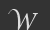
<style>
.page{position:relative;width:50px;height:30px;background:#333333}
.page>*{position:absolute;margin:0}
.t1{font:24px "LucidaCalligraphy-Italic";color:#dddddd}
</style>
<div class="page">
<p class="t1" style="left:8px;top:9px;width:30px;height:21px">W</p>
</div>
